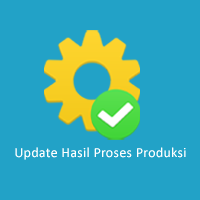
<style>
.page{position:relative;width:200px;height:200px;background:#22a2c7}
.page>*{position:absolute;margin:0}
.t1{font:14px "Calibri";letter-spacing:0.02em;color:#ffffff}
</style>
<div class="page">
<p class="t1" style="left:15px;top:147px;width:171px;height:13px">Update Hasil Proses Produksi</p>
</div>
